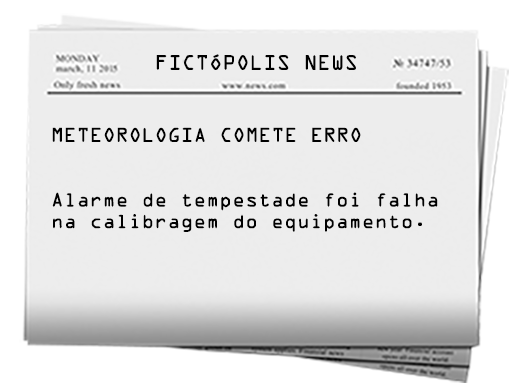
<style>
.page{position:relative;width:512px;height:387px;background:#ededed}
.page>*{position:absolute;margin:0}
.t1{font:18.8px "OCRAStd";color:#000000}
.t2{font:18px "OCRAStd";color:#000000}
</style>
<div class="page">
<p class="t1" style="left:156px;top:54px;width:200px;height:16px">FICTÓPOLIS NEWS</p>
<p class="t2" style="left:52px;top:127px;width:386px;height:105px">METEOROLOGIA COMETE ERRO<br><br><br>Alarme de tempestade foi falha<br>na calibragem do equipamento.</p>
</div>
